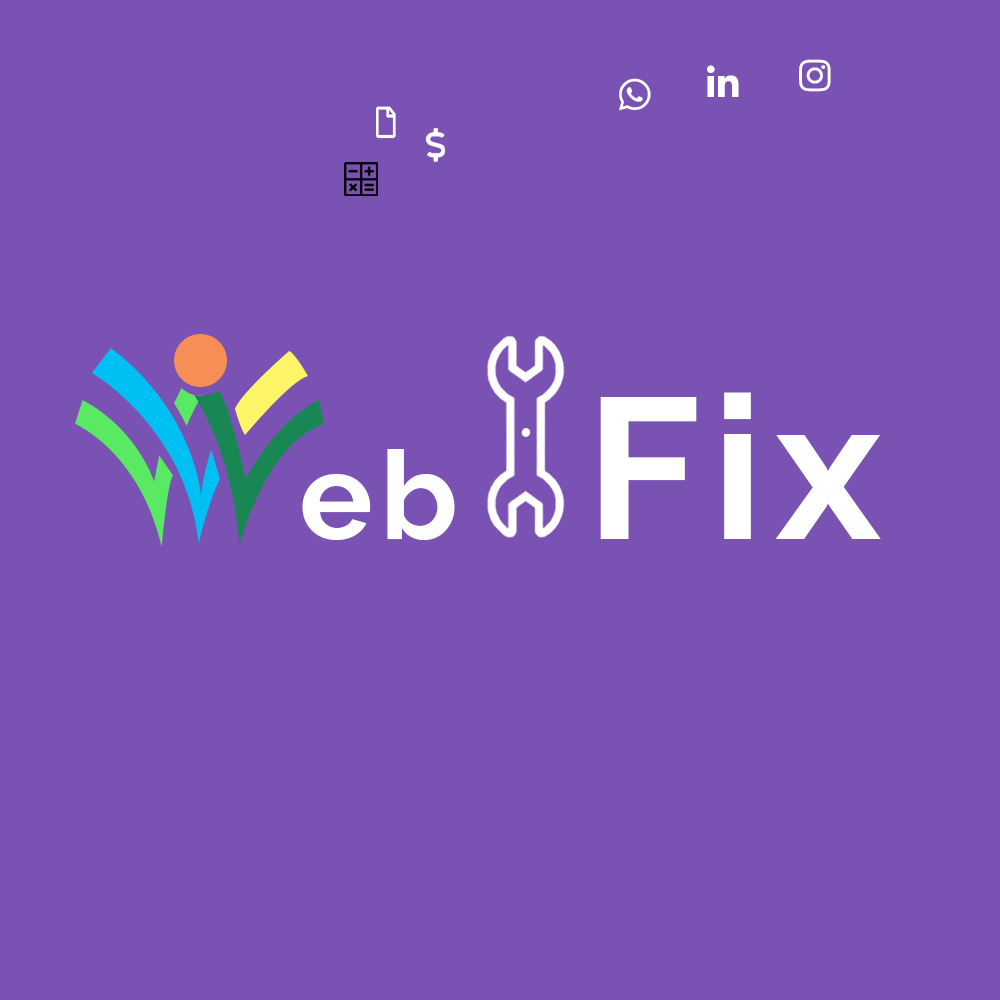
<style>
.page{position:relative;width:1000px;height:1000px;background:#7952b3}
.page>*{position:absolute;margin:0}
.t1{font:199.6px "RalewayRoman-Bold";letter-spacing:0.06em;color:#ffffff}
.t2{font:55.3px "BerlinSansFB-Reg";letter-spacing:0.06em;color:#fffefe}
.t3{font:123px "RalewayRoman-Bold";letter-spacing:0.06em;color:#ffffff}
</style>
<div class="page">
<p class="t1" style="left:600px;top:392px;width:281px;height:147px">Fix</p>
<p class="t2" style="left:521px;top:428px;width:10px;height:9px;rotate:20deg">.</p>
<p class="t3" style="left:302px;top:449px;width:153px;height:91px">eb</p>
</div>
